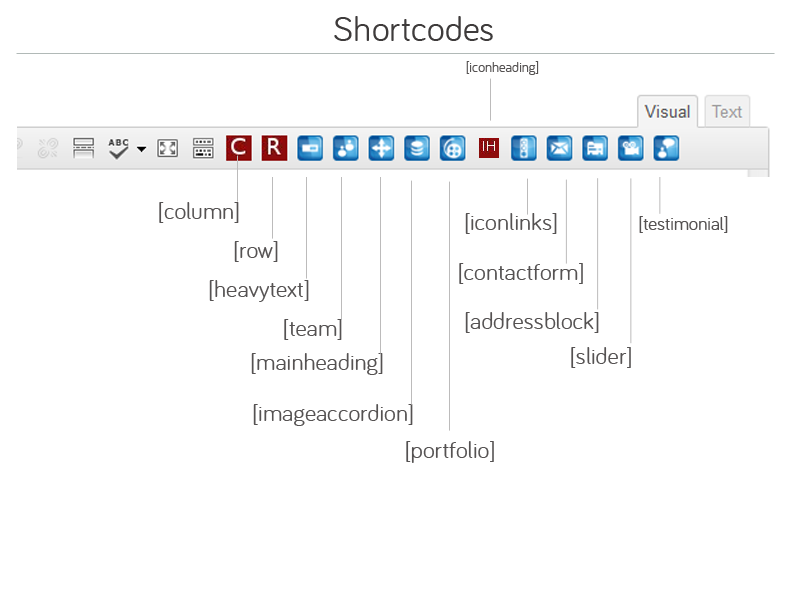
<style>
.page{position:relative;width:790px;height:600px;background:#ffffff}
.page>*{position:absolute;margin:0}
.t1{font:36px "Bariol-Regular";color:#3e3b3b}
.t2{font:14px "Bariol-Regular";color:#555252}
.t3{font:24px "Bariol-Regular";color:#555252}
.t4{font:18.7px "Bariol-Regular";color:#555252}
</style>
<div class="page">
<p class="t1" style="left:334px;top:16px;width:159px;height:25px">Shortcodes</p>
<p class="t2" style="left:466px;top:61px;width:73px;height:14px">[iconheading]</p>
<p class="t3" style="left:159px;top:202px;width:80px;height:21px">[column]</p>
<p class="t3" style="left:465px;top:213px;width:92px;height:21px">[iconlinks]</p>
<p class="t4" style="left:639px;top:216px;width:89px;height:17px">[testimonial]</p>
<p class="t3" style="left:234px;top:241px;width:44px;height:21px">[row]</p>
<p class="t3" style="left:459px;top:263px;width:124px;height:21px">[contactform]</p>
<p class="t3" style="left:209px;top:280px;width:100px;height:22px">[heavytext]</p>
<p class="t3" style="left:465px;top:312px;width:134px;height:21px">[addressblock]</p>
<p class="t3" style="left:284px;top:319px;width:58px;height:21px">[team]</p>
<p class="t3" style="left:251px;top:353px;width:132px;height:22px">[mainheading]</p>
<p class="t3" style="left:571px;top:347px;width:60px;height:21px">[slider]</p>
<p class="t3" style="left:253px;top:404px;width:160px;height:22px">[imageaccordion]</p>
<p class="t3" style="left:406px;top:441px;width:88px;height:22px">[portfolio]</p>
</div>
